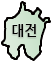
<style>
.page{position:relative;width:53px;height:63px;background:#ffffff}
.page>*{position:absolute;margin:0}
.t1{font:14px "HancomGothicBold";color:#000000}
</style>
<div class="page">
<p class="t1" style="left:12px;top:24px;width:25px;height:13px">대전</p>
</div>
